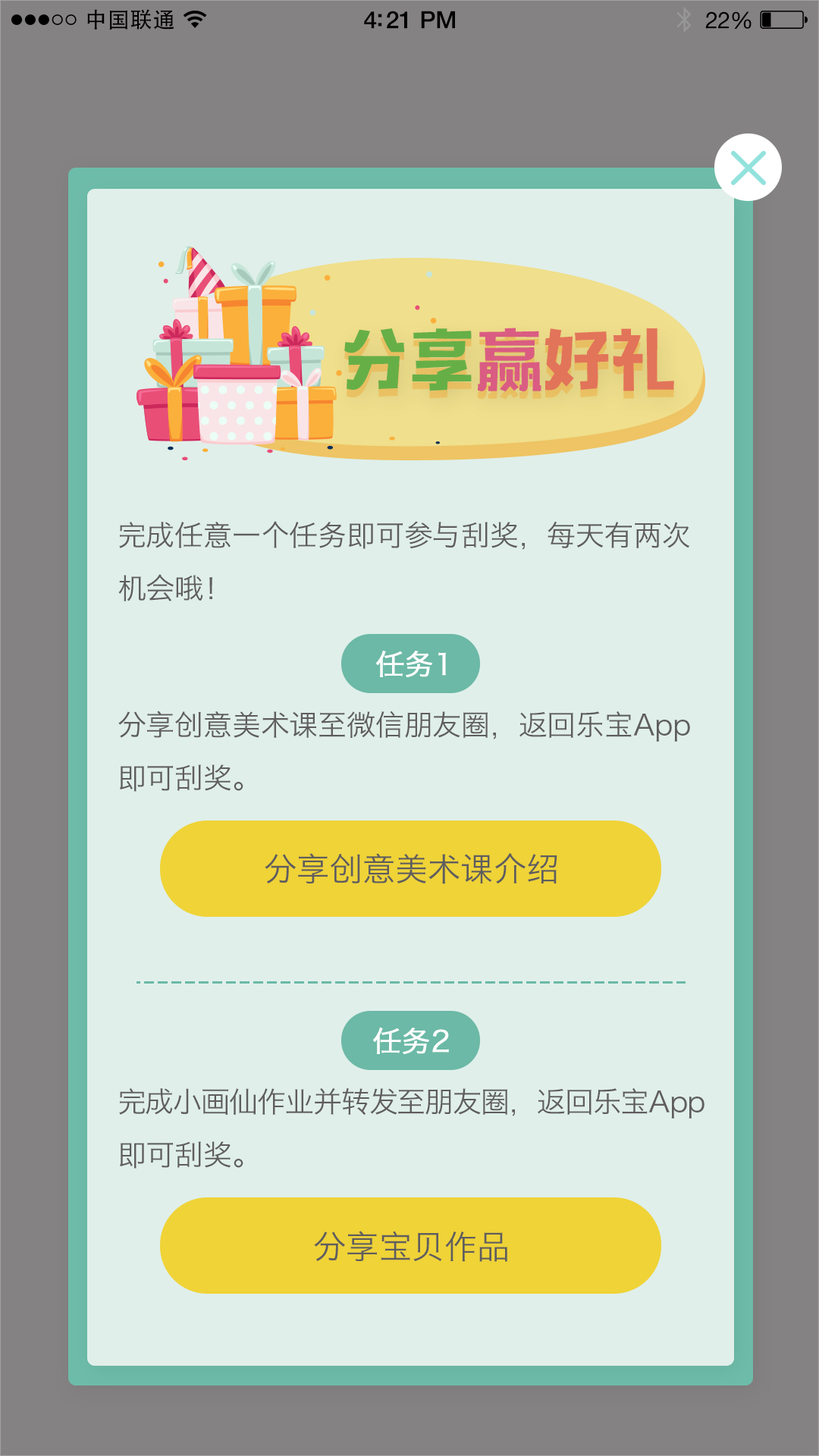
<style>
.page{position:relative;width:819px;height:1456px;background:#e0efea}
.page>*{position:absolute;margin:0}
.t1{font:22px "AdobeHeitiStd-Regular";letter-spacing:0.02em;color:#000000}
.t2{font:23.9px "HelveticaNeue-Medium";letter-spacing:-0.02em;color:#000000}
.t3{font:22.9px "HelveticaNeue";letter-spacing:-0.02em;color:#000000}
.t4{font:67.4px "MFTongXin_Noncommercial-Regular";color:#66af47}
.t5{font:67.4px "MFTongXin_Noncommercial-Regular";color:#da5c82}
.t6{font:67.4px "MFTongXin_Noncommercial-Regular";color:#e27459}
.t7{font:67.4px "MFTongXin_Noncommercial-Regular"}
.t8{font:28.8px/52.9px "HiraginoSansGB-W3";letter-spacing:-0.006em;color:#5f5d5e}
.t9{font:28.8px "HiraginoSansGB-W3";letter-spacing:-0.006em;color:#feffff;font-weight:bold}
.t10{font:32.7px "HiraginoSansGB-W3";color:#5f5d5e}
.t11{font:28.8px "HiraginoSansGB-W3";letter-spacing:-0.006em;color:#ffffff;font-weight:bold}
.t12{font:28.8px/52.9px "HiraginoSansGB-W3";letter-spacing:-0.03em;color:#5f5d5e}
</style>
<div class="page">
<p class="t1" style="left:87px;top:9px;width:87px;height:21px">中国联通</p>
<p class="t2" style="left:364px;top:11px;width:91px;height:18px">4:21 PM</p>
<p class="t3" style="left:705px;top:11px;width:46px;height:18px">22%</p>
<p class="t4" style="left:344px;top:328px;width:330px;height:64px">分享<span class="t5">赢</span><span class="t6">好礼</span></p>
<p class="t7" style="left:344px;top:335px;width:330px;height:65px">分享赢好礼</p>
<p class="t8" style="left:118px;top:521px;width:572px;height:80px">完成任意一个任务即可参与刮奖，每天有两次<br>机会哦！</p>
<p class="t9" style="left:376px;top:651px;width:70px;height:26px">任务1</p>
<p class="t8" style="left:118px;top:711px;width:572px;height:81px">分享创意美术课至微信朋友圈，返回乐宝App<br>即可刮奖。</p>
<p class="t10" style="left:265px;top:853px;width:292px;height:31px">分享创意美术课介绍</p>
<p class="t11" style="left:373px;top:1028px;width:76px;height:26px">任务2</p>
<p class="t12" style="left:119px;top:1088px;width:585px;height:81px">完成小画仙作业并转发至朋友圈，返回乐宝App<br><span class="t8">即可刮奖。</span></p>
<p class="t10" style="left:314px;top:1231px;width:193px;height:31px">分享宝贝作品</p>
</div>
